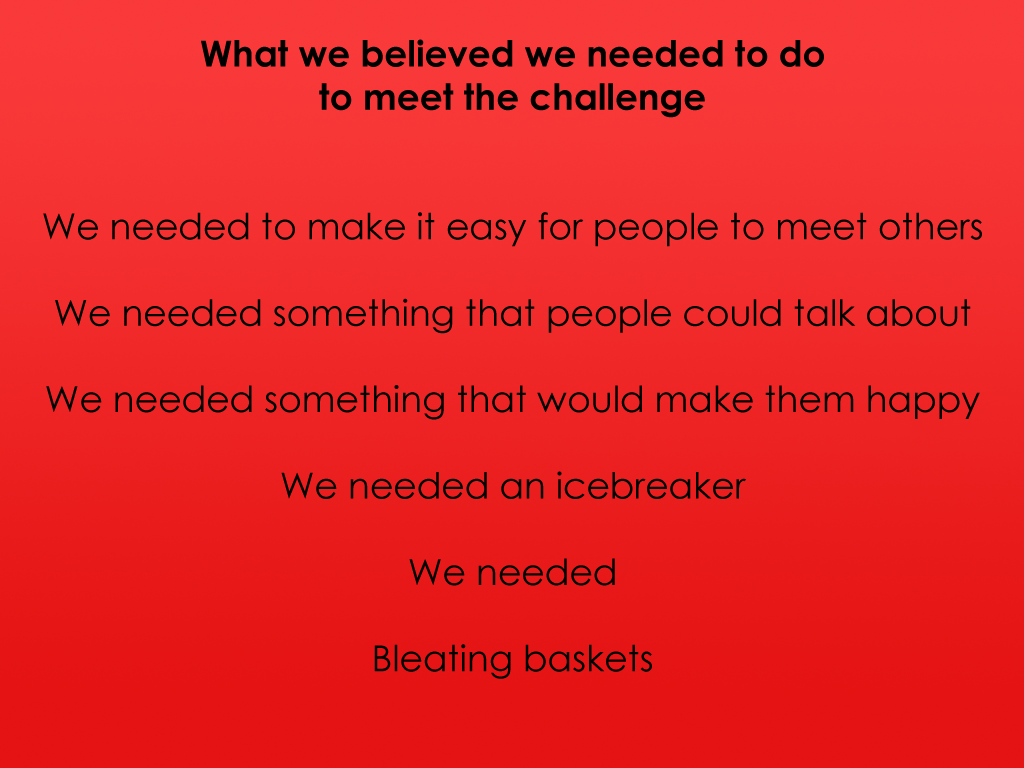
<style>
.page{position:relative;width:1024px;height:768px}
.page>*{position:absolute;margin:0}
.t1{font:36px "CenturyGothic";color:#000000}
.t2{font:36px "CenturyGothic-Bold";color:#000000}
</style>
<div class="page">
<p class="t1" style="left:43px;top:39px;width:939px;height:640px;text-align:center"><span class="t2">What we believed we needed to do <br>to meet the challenge<br><br></span><br>We needed to make it easy for people to meet others<br><br>We needed something that people could talk about <br><br>We needed something that would make them happy <br><br>We needed an icebreaker <br><br>We needed<br><br>Bleating baskets</p>
</div>
